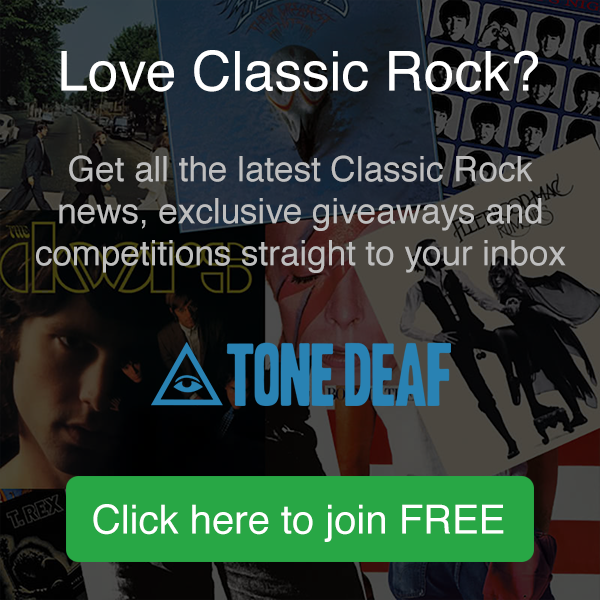
<style>
.page{position:relative;width:600px;height:600px}
.page>*{position:absolute;margin:0}
.t1{font:55px "Helvetica";color:#ffffff}
.t2{font:35px "Helvetica";color:#bebebe}
.t3{font:40px "Helvetica";color:#ffffff}
</style>
<div class="page">
<p class="t1" style="left:61px;top:50px;width:477px;height:42px">Love Classic Rock?</p>
<p class="t2" style="left:36px;top:155px;width:530px;height:118px;text-align:center">Get all the latest Classic Rock news, exclusive giveaways and competitions straight to your inbox<br><br>v</p>
<p class="t3" style="left:93px;top:504px;width:411px;height:38px">Click here to join FREE</p>
</div>
